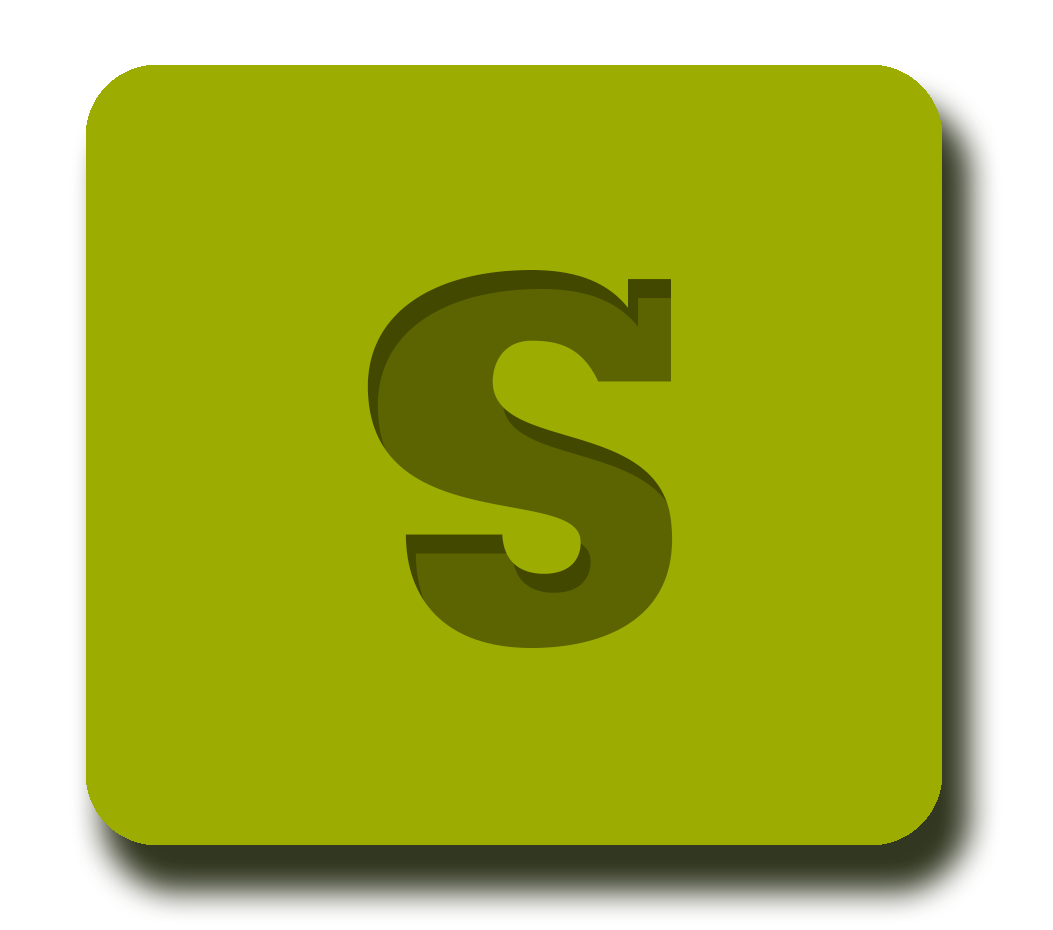
<style>
.page{position:relative;width:1053px;height:930px;background:#9cac00}
.page>*{position:absolute;margin:0}
.t1{font:504.7px "BadTyp-Regular";color:#5b6400}
</style>
<div class="page">
<p class="t1" style="left:367px;top:270px;width:306px;height:379px">s</p>
</div>
